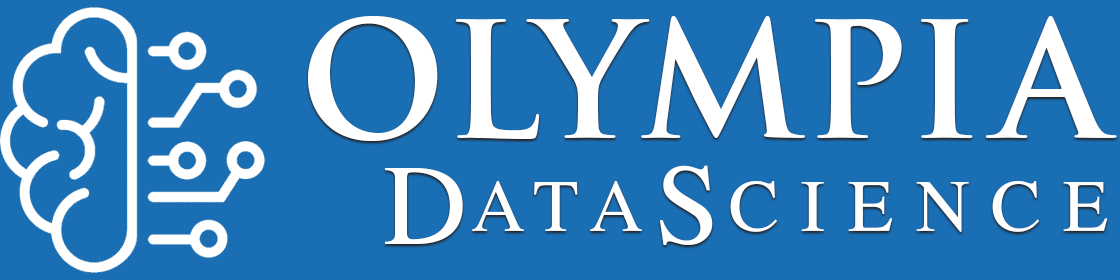
<style>
.page{position:relative;width:1120px;height:280px;background:#196eb4}
.page>*{position:absolute;margin:0}
.t1{font:158.3px "TrajanPro-Bold";color:#ffffff}
.t2{font:170px "Gotham-Black";color:#ffffff}
.t3{font:108.3px "AFMonogrambyKestrelMontes";color:#ffffff}
</style>
<div class="page">
<p class="t1" style="left:308px;top:16px;width:809px;height:126px"><span class="t2">    </span>OLYMPIA</p>
<p class="t3" style="left:385px;top:165px;width:723px;height:80px">DataScience</p>
</div>
